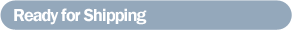
<style>
.page{position:relative;width:292px;height:30px;background:#94a8bb}
.page>*{position:absolute;margin:0}
.t1{font:18px "FranklinGothic-Demi";letter-spacing:-0.05em;color:#ffffff}
</style>
<div class="page">
<p class="t1" style="left:14px;top:8px;width:133px;height:17px">Ready for Shipping</p>
</div>
